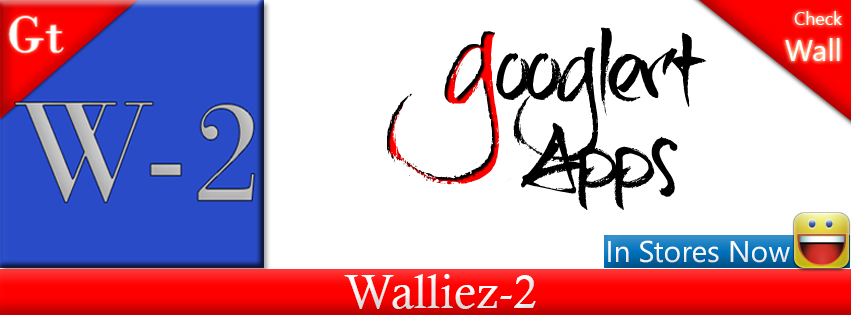
<style>
.page{position:relative;width:851px;height:315px;background:#ffffff}
.page>*{position:absolute;margin:0}
.t1{font:18px "SegoeUI";color:#ffffff}
.t2{font:30.1px "SegoeUI";color:#ffffff}
.t3{font:30px "SegoeUI";color:#ffffff}
.t4{font:48px "CalistoMT";color:#fefefe}
</style>
<div class="page">
<p class="t1" style="left:785px;top:11px;width:57px;height:50px">Check<br><span class="t2">Wall</span></p>
<p class="t3" style="left:608px;top:240px;width:182px;height:23px">In Stores Now</p>
<p class="t4" style="left:344px;top:274px;width:192px;height:35px">Walliez-2</p>
</div>
